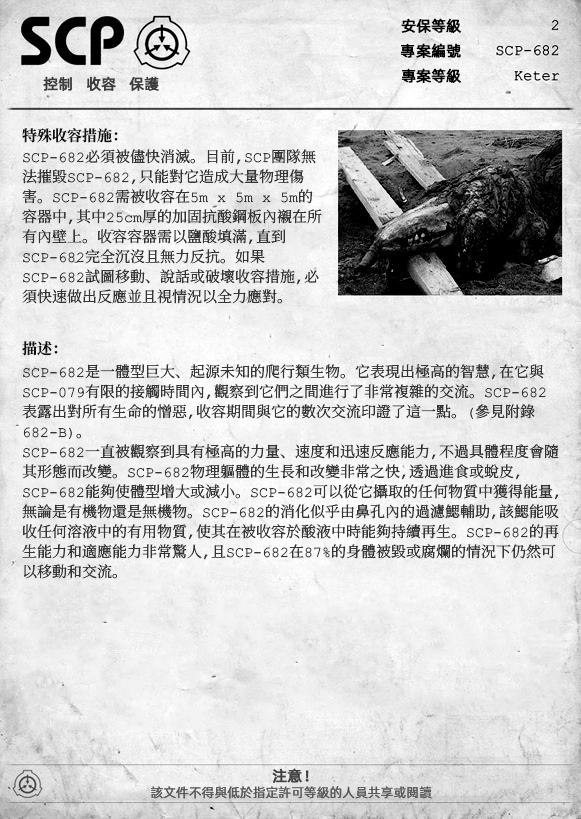
<style>
.page{position:relative;width:581px;height:819px}
.page>*{position:absolute;margin:0}
.t1{font:15px "AlibabaPuHuiTiR";color:#000000;font-weight:bold}
.t2{font:15px "AlibabaPuHuiTiR";color:#3d3d3d;font-weight:bold}
.t3{font:15px "ContainmentBreach-Bold";color:#121212}
.t4{font:15px/20px "ContainmentBreach-Regular";color:#353535}
.t5{font:15px "AlibabaPuHuiTiR";color:#414141;font-weight:bold}
.t6{font:13px "AlibabaPuHuiTiR";color:#575757}
</style>
<div class="page">
<p class="t1" style="left:401px;top:18px;width:60px;height:15px">安保等級</p>
<p class="t1" style="left:400px;top:43px;width:61px;height:15px">專案編號</p>
<p class="t2" style="left:43px;top:76px;width:116px;height:15px">控制   收容   保護</p>
<p class="t1" style="left:401px;top:68px;width:60px;height:15px">專案等級</p>
<p class="t3" style="left:22px;top:128px;width:96px;height:15px">特殊收容措施：</p>
<p class="t4" style="left:22px;top:149px;width:300px;height:155px">SCP-682必須被儘快消滅。目前，SCP團隊無<br>法摧毀SCP-682，只能對它造成大量物理傷<br>害。SCP-682需被收容在5m x 5m x 5m的<br>容器中，其中25cm厚的加固抗酸鋼板內襯在所<br>有內壁上。收容容器需以鹽酸填滿，直到<br>SCP-682完全沉沒且無力反抗。如果<br>SCP-682試圖移動、說話或破壞收容措施，必<br>須快速做出反應並且視情況以全力應對。</p>
<p class="t3" style="left:22px;top:341px;width:36px;height:15px">描述：</p>
<p class="t4" style="left:22px;top:364px;width:537px;height:215px">SCP-682是一體型巨大、起源未知的爬行類生物。它表現出極高的智慧，在它與<br>SCP-079有限的接觸時間內，觀察到它們之間進行了非常複雜的交流。SCP-682<br>表露出對所有生命的憎惡，收容期間與它的數次交流印證了這一點。（參見附錄<br>682-B）。<br>SCP-682一直被觀察到具有極高的力量、速度和迅速反應能力，不過具體程度會隨<br>其形態而改變。SCP-682物理軀體的生長和改變非常之快，透過進食或蛻皮，<br>SCP-682能夠使體型增大或減小。SCP-682可以從它攝取的任何物質中獲得能量，<br>無論是有機物還是無機物。SCP-682的消化似乎由鼻孔內的過濾鰓輔助，該鰓能吸<br>收任何溶液中的有用物質，使其在被收容於酸液中時能夠持續再生。SCP-682的再<br>生能力和適應能力非常驚人，且SCP-682在87%的身體被毀或腐爛的情況下仍然可<br>以移動和交流。</p>
<p class="t5" style="left:272px;top:768px;width:37px;height:15px">注意！</p>
<p class="t6" style="left:151px;top:786px;width:281px;height:13px">該文件不得與低於指定許可等級的人員共享或閱讀</p>
</div>
